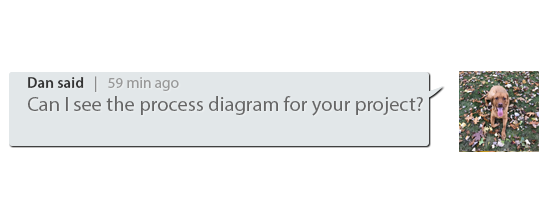
<style>
.page{position:relative;width:550px;height:200px;background:#ffffff}
.page>*{position:absolute;margin:0}
.t1{font:15.3px "MyriadPro-Regular";color:#999999}
.t2{font:15.3px "MyriadPro-Semibold";color:#333333}
.t3{font:15.3px "MyriadPro-Regular";color:#8b8b8b}
.t4{font:20.4px "MyriadPro-Regular";color:#666666}
</style>
<div class="page">
<p class="t1" style="left:28px;top:76px;width:151px;height:16px"><span class="t2">Dan said </span><span class="t3">  |   </span>59 min ago</p>
<p class="t4" style="left:28px;top:96px;width:395px;height:20px">Can I see the process diagram for your project?</p>
</div>
